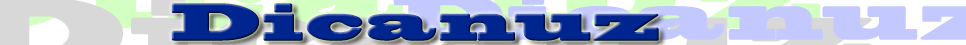
<style>
.page{position:relative;width:966px;height:45px}
.page>*{position:absolute;margin:0}
.t1{font:48px "BlackoakStd";letter-spacing:0.025em;color:#00258e;font-weight:bold}
</style>
<div class="page">
<p class="t1" style="left:171px;top:3px;width:488px;height:38px">Dicanuz</p>
</div>
